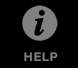
<style>
.page{position:relative;width:78px;height:68px;background:#000000}
.page>*{position:absolute;margin:0}
.t1{font:12.1px "AlteHaasGrotesk_Bold";letter-spacing:0.05em;color:#808080}
</style>
<div class="page">
<p class="t1" style="left:24px;top:52px;width:34px;height:9px">HELP</p>
</div>
